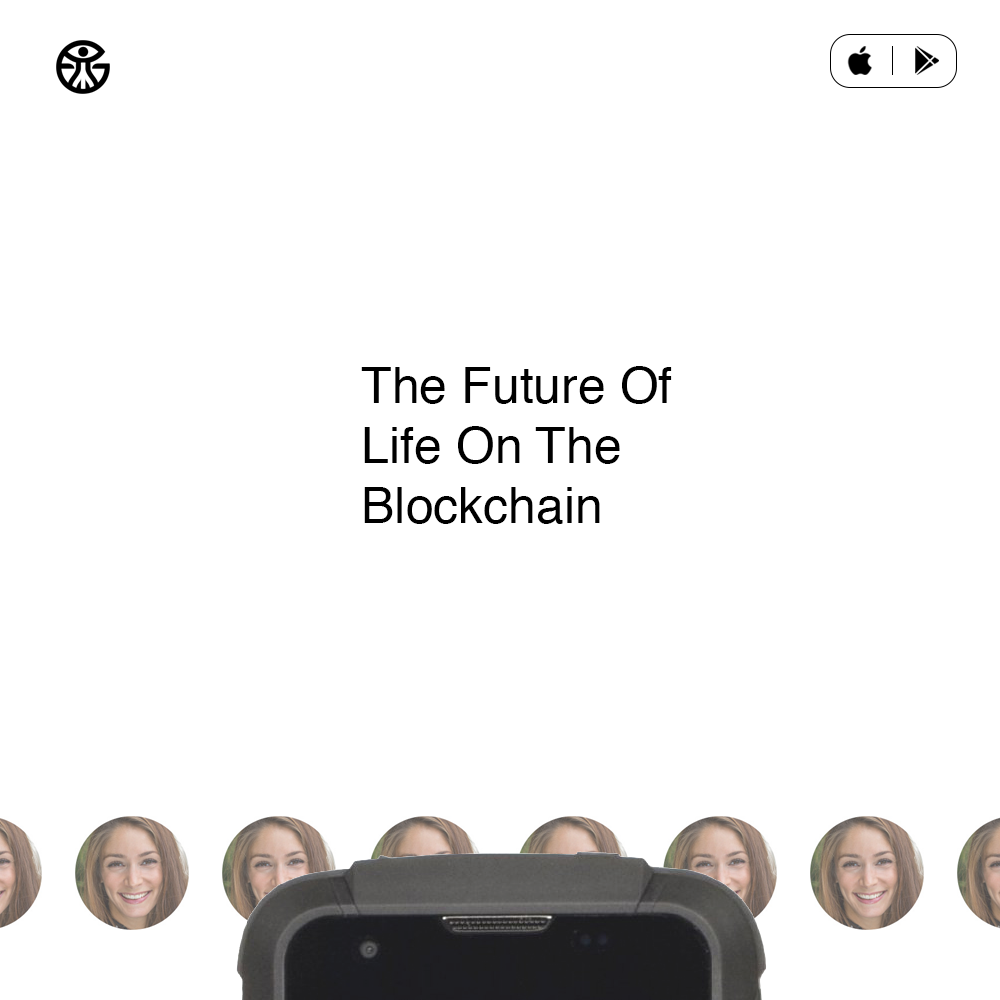
<style>
.page{position:relative;width:1000px;height:1000px;background:#ffffff}
.page>*{position:absolute;margin:0}
.t1{font:50px "Helvetica";color:#000000}
</style>
<div class="page">
<p class="t1" style="left:361px;top:366px;width:311px;height:158px">The Future Of <br>Life On The <br>Blockchain</p>
</div>
